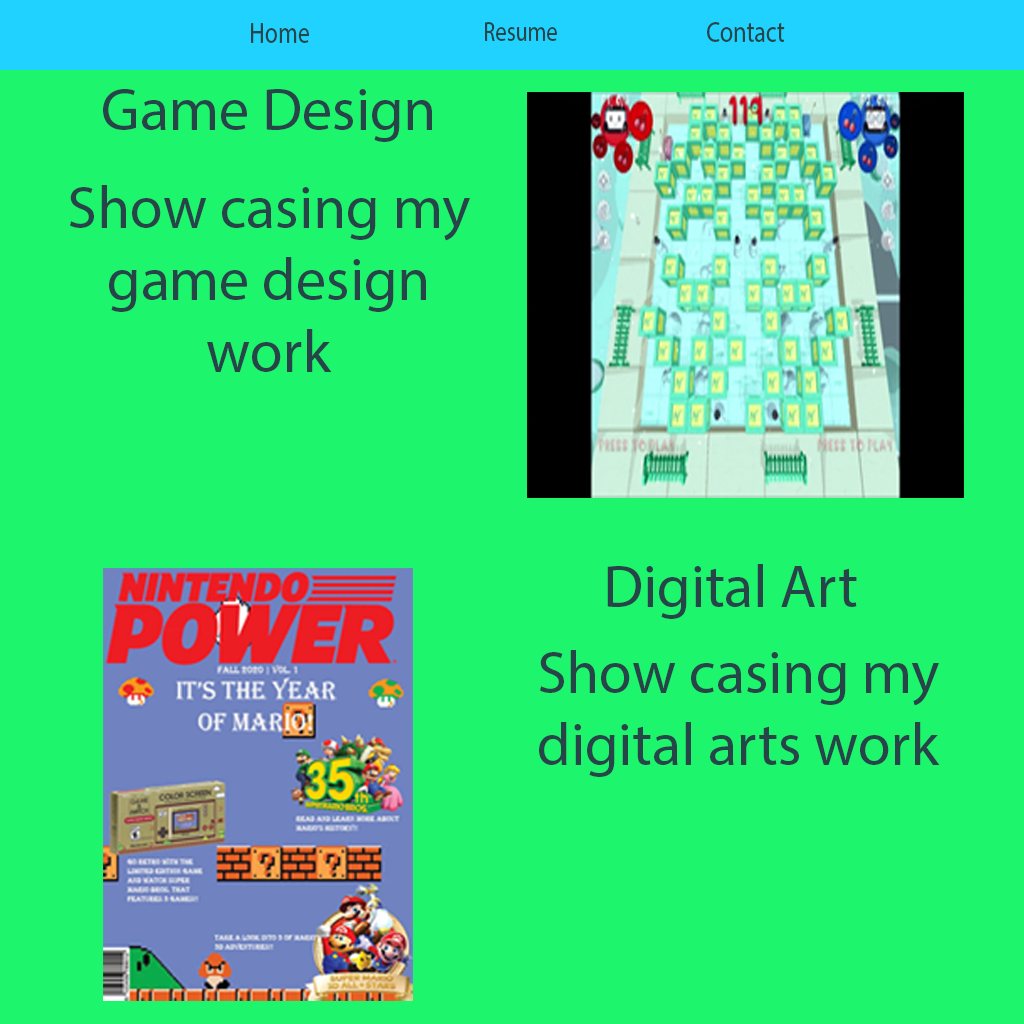
<style>
.page{position:relative;width:1024px;height:1024px;background:#1df56d}
.page>*{position:absolute;margin:0}
.t1{font:29.8px "MyriadPro-Regular";color:#274448;scale:0.8 1}
.t2{font:28.3px "MyriadPro-Regular";color:#274448;scale:0.79 1}
.t3{font:60px "MyriadPro-Regular";color:#274448}
</style>
<div class="page">
<p class="t1" style="left:251px;top:23px;width:58px;height:20px">Home</p>
<p class="t2" style="left:485px;top:22px;width:72px;height:19px">Resume</p>
<p class="t1" style="left:707px;top:22px;width:78px;height:20px">Contact</p>
<p class="t3" style="left:103px;top:89px;width:329px;height:53px">Game Design</p>
<p class="t3" style="left:70px;top:185px;width:400px;height:187px;text-align:center">Show casing my game design work</p>
<p class="t3" style="left:607px;top:564px;width:250px;height:55px">Digital Art</p>
<p class="t3" style="left:539px;top:650px;width:401px;height:127px;text-align:center">Show casing my digital arts work</p>
</div>
